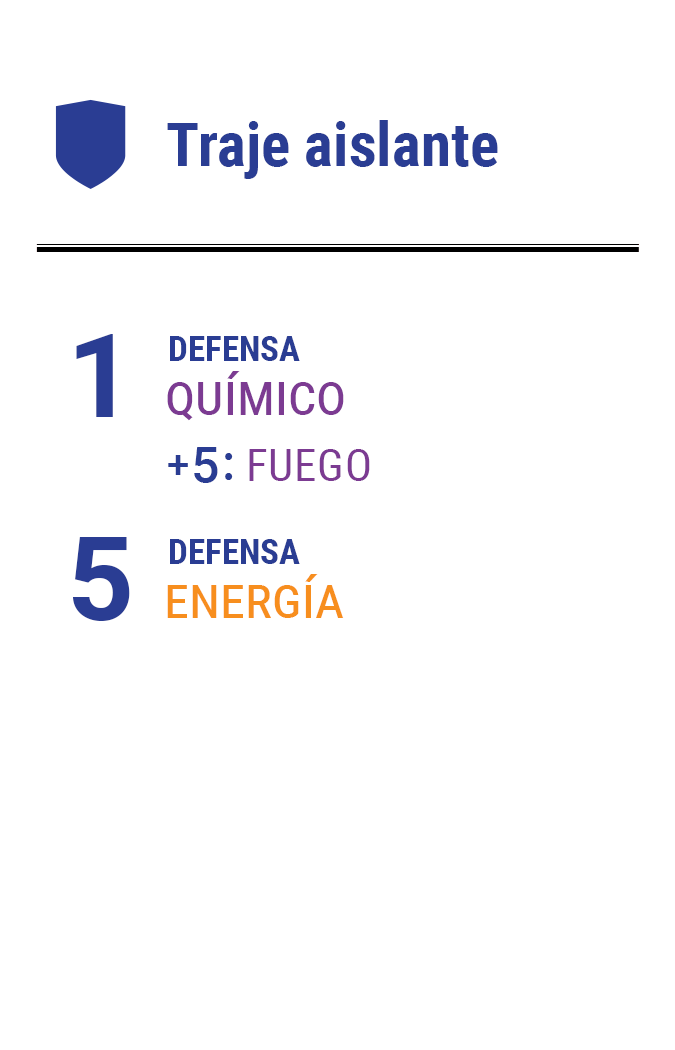
<style>
.page{position:relative;width:675px;height:1050px;background:#ffffff}
.page>*{position:absolute;margin:0}
.t1{font:61.2px "RobotoCondensed-Bold";color:#2a3d93}
.t2{font:116.7px "Roboto-Bold";letter-spacing:-0.16em;color:#2a3d93}
.t3{font:35px "RobotoCondensed-Bold";color:#2a3d93}
.t4{font:58.3px "RobotoCondensed-Regular";color:#7c3b92;font-variant:small-caps}
.t5{font:49.8px "Roboto-Medium";letter-spacing:-0.1em;color:#2a3d93}
.t6{font:39.7px "Roboto-Medium";letter-spacing:-0.1em;color:#2a3d93}
.t7{font:44.6px "RobotoCondensed-Regular";letter-spacing:0.02em;color:#7c3b92;text-transform:uppercase}
.t8{font:58.3px "RobotoCondensed-Regular";color:#f78e1e;font-variant:small-caps}
</style>
<div class="page">
<p class="t1" style="left:167px;top:120px;width:331px;height:59px">Traje aislante</p>
<p class="t2" style="left:76px;top:334px;width:37px;height:83px">1</p>
<p class="t3" style="left:170px;top:336px;width:130px;height:25px">DEFENSA</p>
<p class="t4" style="left:167px;top:371px;width:177px;height:50px">químico</p>
<p class="t5" style="left:168px;top:447px;width:65px;height:36px"><span class="t6">+ </span>5 :</p>
<p class="t7" style="left:249px;top:449px;width:121px;height:32px">fuego</p>
<p class="t2" style="left:73px;top:537px;width:57px;height:84px">5</p>
<p class="t3" style="left:170px;top:539px;width:130px;height:25px">DEFENSA</p>
<p class="t8" style="left:167px;top:574px;width:177px;height:44px">energía</p>
</div>
